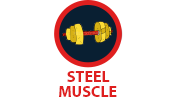
<style>
.page{position:relative;width:176px;height:100px;background:#ffffff}
.page>*{position:absolute;margin:0}
.t1{font:16px "MyriadPro-Bold";color:#df1f1f}
</style>
<div class="page">
<p class="t1" style="left:67px;top:71px;width:43px;height:11px">STEEL</p>
<p class="t1" style="left:59px;top:86px;width:58px;height:11px">MUSCLE</p>
</div>
